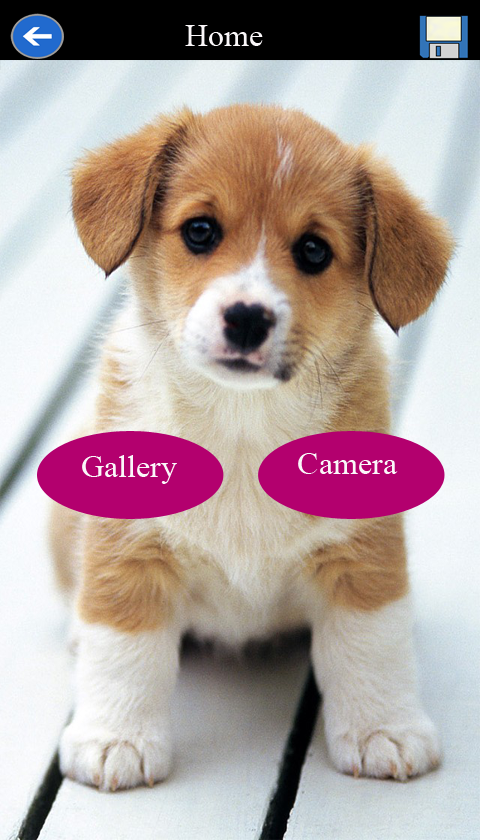
<style>
.page{position:relative;width:480px;height:840px}
.page>*{position:absolute;margin:0}
.t1{font:32px "TimesNewRomanPSMT";color:#faf7f9}
</style>
<div class="page">
<p class="t1" style="left:185px;top:25px;width:78px;height:21px">Home</p>
<p class="t1" style="left:82px;top:455px;width:95px;height:29px">Gallery</p>
<p class="t1" style="left:298px;top:453px;width:100px;height:21px">Camera</p>
</div>
